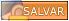
<style>
.page{position:relative;width:69px;height:21px}
.page>*{position:absolute;margin:0}
.t1{font:10.7px "Verdana";color:#ffffff}
</style>
<div class="page">
<p class="t1" style="left:23px;top:7px;width:42px;height:9px">SALVAR</p>
</div>
